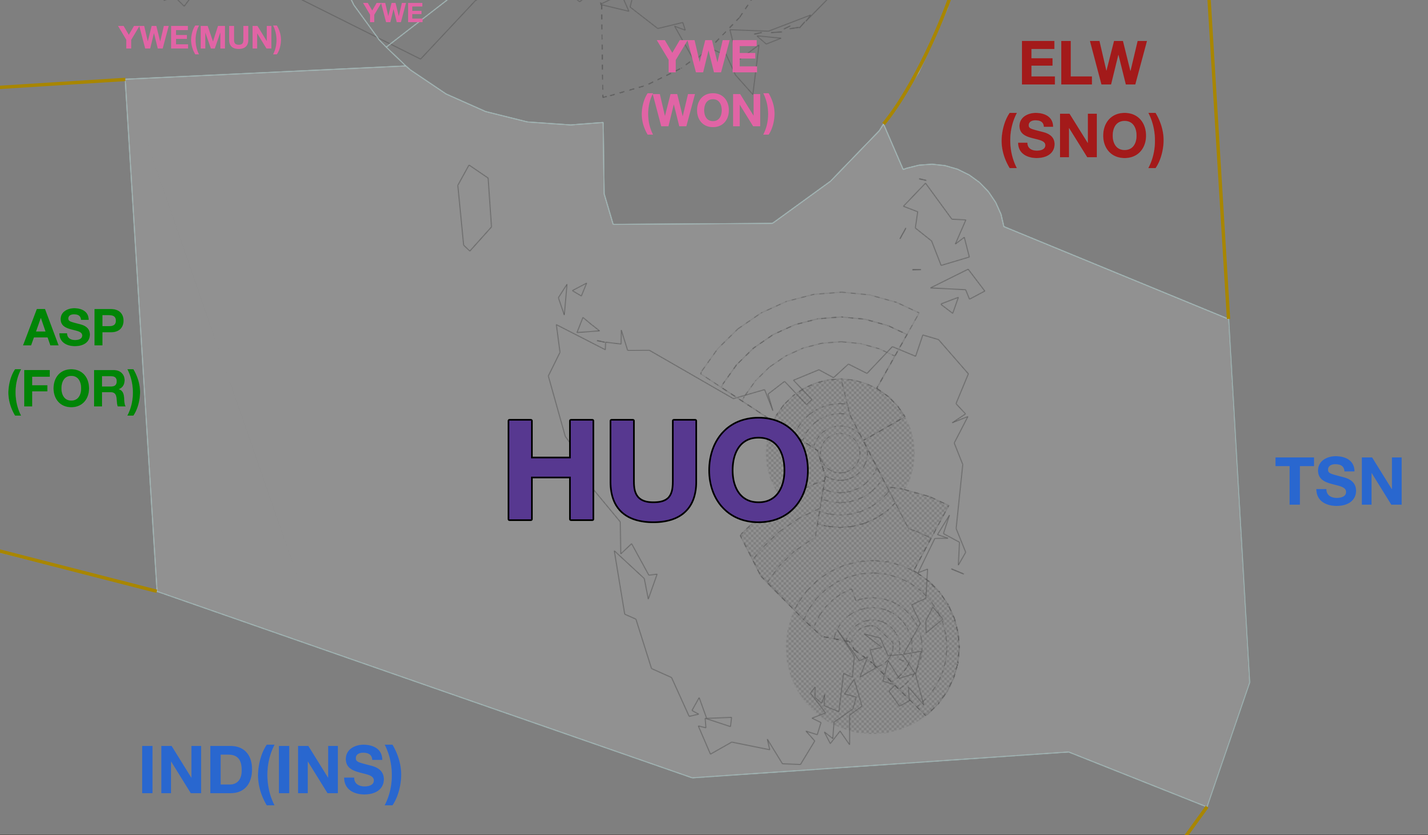
<style>
.page{position:relative;width:1428px;height:835px;background:#919191}
.page>*{position:absolute;margin:0}
.t1{font:26.7px "HelveticaNeueLTStd-Bd";color:#e164a5}
.t2{font:31.4px "HelveticaNeueLTStd-Bd";color:#e164a5}
.t3{font:45px "HelveticaNeueLTStd-Bd";color:#e164a5}
.t4{font:60.9px "HelveticaNeueLTStd-Bd";color:#a31a1a}
.t5{font:50.9px "HelveticaNeueLTStd-Bd";color:#008506}
.t6{font:138.4px "HelveticaNeueLTStd-Bd";color:#573890}
.t7{font:65.9px "HelveticaNeueLTStd-Bd";color:#2967cf}
</style>
<div class="page">
<p class="t1" style="left:363px;top:3px;width:60px;height:19px">YWE</p>
<p class="t2" style="left:118px;top:26px;width:163px;height:28px">YWE(MUN)</p>
<p class="t3" style="left:641px;top:40px;width:134px;height:95px;text-align:center">YWE<br>(WON)</p>
<p class="t4" style="left:1001px;top:41px;width:163px;height:127px;text-align:center">ELW<br>(SNO)</p>
<p class="t5" style="left:8px;top:308px;width:132px;height:108px;text-align:center">ASP<br>(FOR)</p>
<p class="t6" style="left:509px;top:419px;width:298px;height:102px">HUO</p>
<p class="t7" style="left:1275px;top:456px;width:127px;height:50px">TSN</p>
<p class="t7" style="left:142px;top:745px;width:259px;height:60px">IND(INS)</p>
</div>
